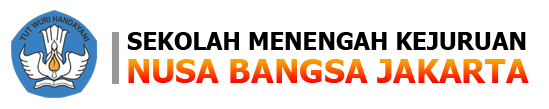
<style>
.page{position:relative;width:549px;height:109px;background:#ffffff}
.page>*{position:absolute;margin:0}
.t1{font:24px "Tahoma-Bold";color:#000000}
.t2{font:33px "Tahoma-Bold"}
</style>
<div class="page">
<p class="t1" style="left:127px;top:32px;width:399px;height:18px">SEKOLAH MENENGAH KEJURUAN</p>
<p class="t2" style="left:128px;top:59px;width:401px;height:24px">NUSA BANGSA JAKARTA</p>
</div>
